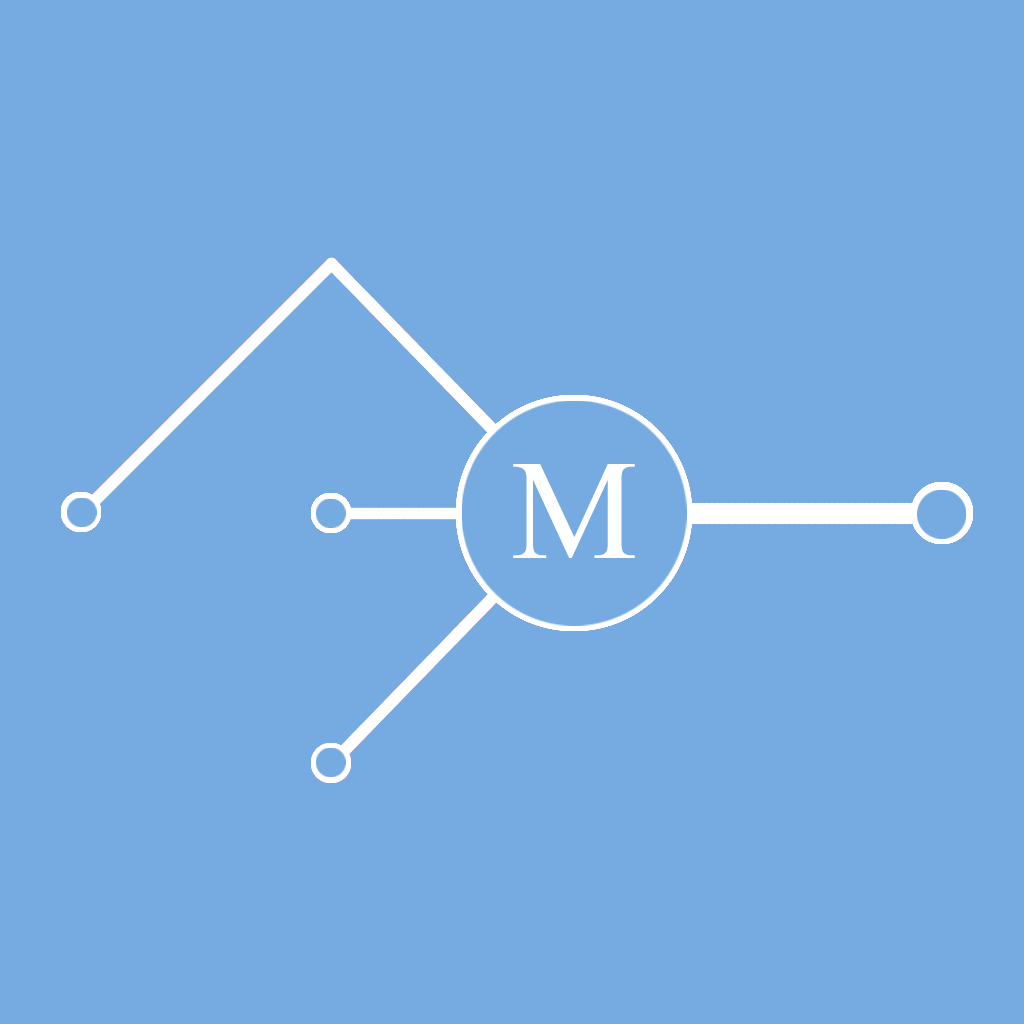
<style>
.page{position:relative;width:1024px;height:1024px;background:#75abe1}
.page>*{position:absolute;margin:0}
.t1{font:177.4px "Aparajita";letter-spacing:-0.04em;color:#ffffff;text-transform:uppercase}
</style>
<div class="page">
<p class="t1" style="left:513px;top:464px;width:122px;height:94px">M</p>
</div>
